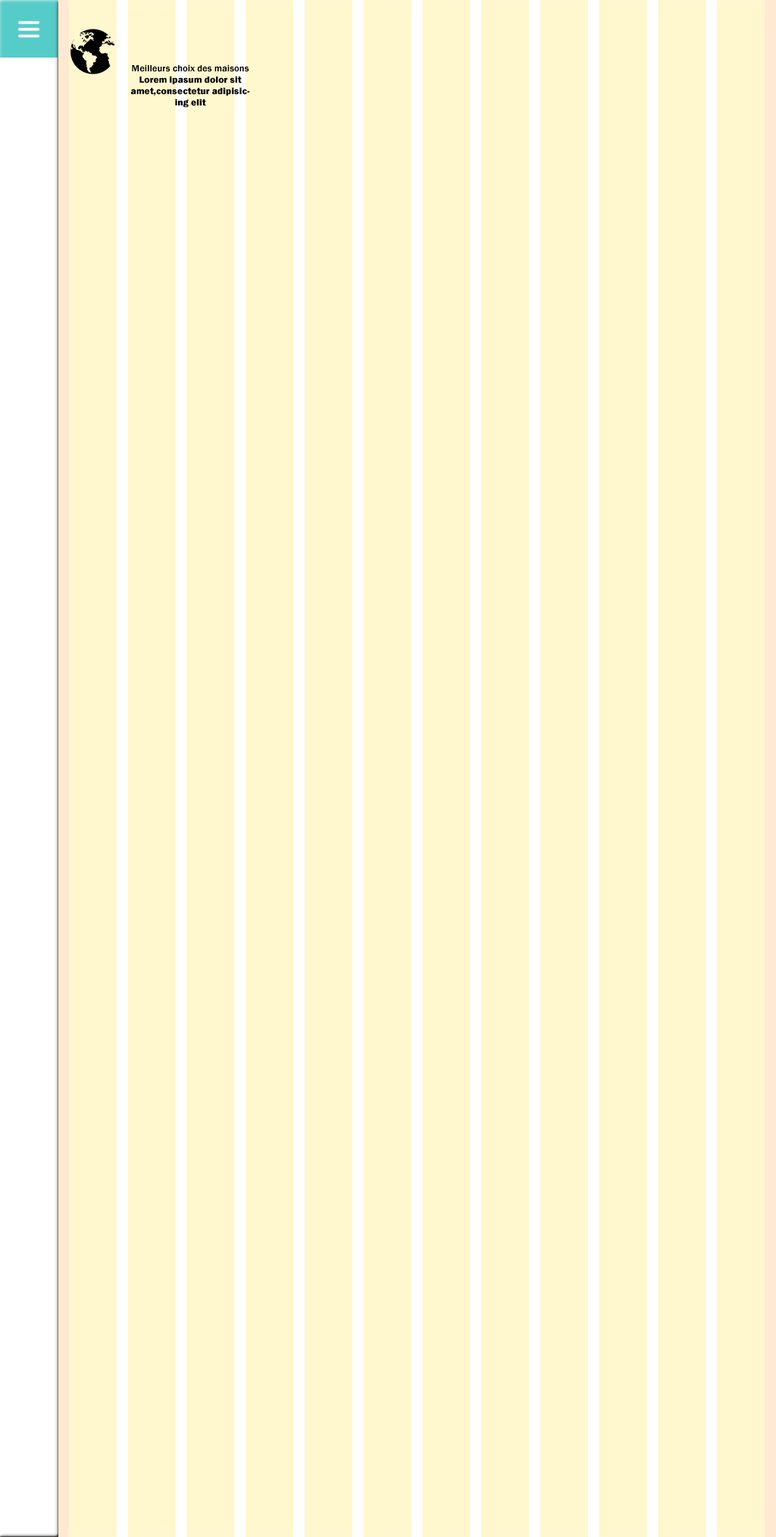
<style>
.page{position:relative;width:776px;height:1537px;background:#fff7ce}
.page>*{position:absolute;margin:0}
.t1{font:9.5px "FranklinGothic-Heavy";color:#000000}
.t2{font:9.5px "FranklinGothic-Demi";color:#000000}
</style>
<div class="page">
<p class="t1" style="left:130px;top:64px;width:120px;height:44px;text-align:center"><span class="t2">Meilleurs choix des maisons<br></span>Lorem ipasum dolor sit amet,consectetur adipisicing elit</p>
</div>
